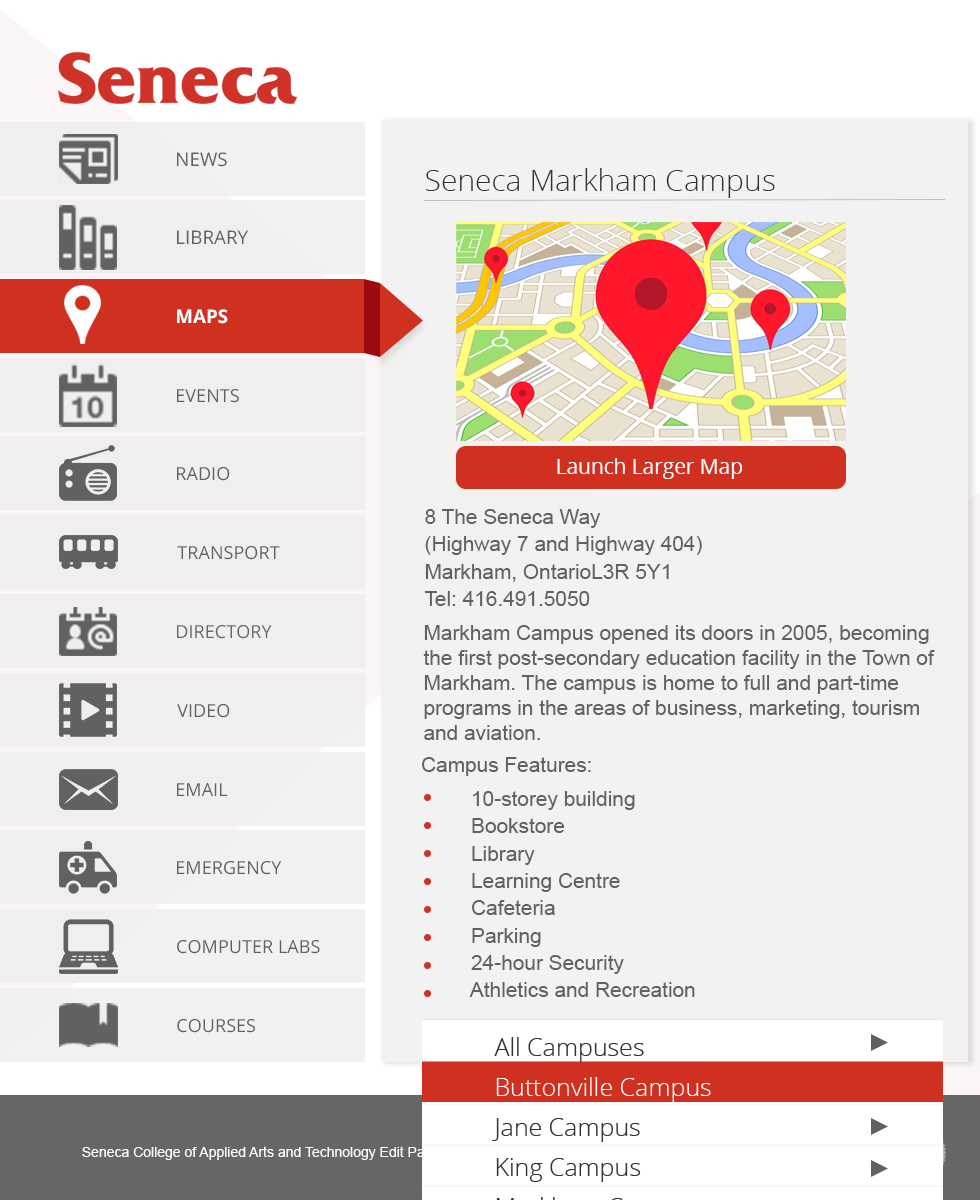
<style>
.page{position:relative;width:980px;height:1200px;background:#f3f2f2}
.page>*{position:absolute;margin:0}
.t1{font:30px "OpenSans-Light";color:#333333}
.t2{font:20.8px "OpenSans";color:#ffffff}
.t3{font:20.8px/25px "ArialMT";color:#616161}
.t4{font:20.8px "ArialMT";color:#616161}
</style>
<div class="page">
<p class="t1" style="left:426px;top:168px;width:349px;height:30px">Seneca Markham Campus</p>
<p class="t2" style="left:557px;top:458px;width:185px;height:21px">Launch Larger Map</p>
<p class="t3" style="left:424px;top:509px;width:278px;height:97px">8 The Seneca Way<br>(Highway 7 and Highway 404)<br>Markham, OntarioL3R 5Y1<br>Tel: 416.491.5050</p>
<p class="t3" style="left:423px;top:625px;width:512px;height:115px">Markham Campus opened its doors in 2005, becoming the first post-secondary education facility in the Town of Markham. The campus is home to full and part-time programs in the areas of business, marketing, tourism and aviation.</p>
<p class="t4" style="left:422px;top:757px;width:169px;height:19px">Campus Features:</p>
<p class="t3" style="left:469px;top:791px;width:226px;height:206px">10-storey building<br>   Bookstore<br>   Library<br>   Learning Centre<br>   Cafeteria<br>   Parking<br>   24-hour Security<br>   Athletics and Recreation</p>
</div>
